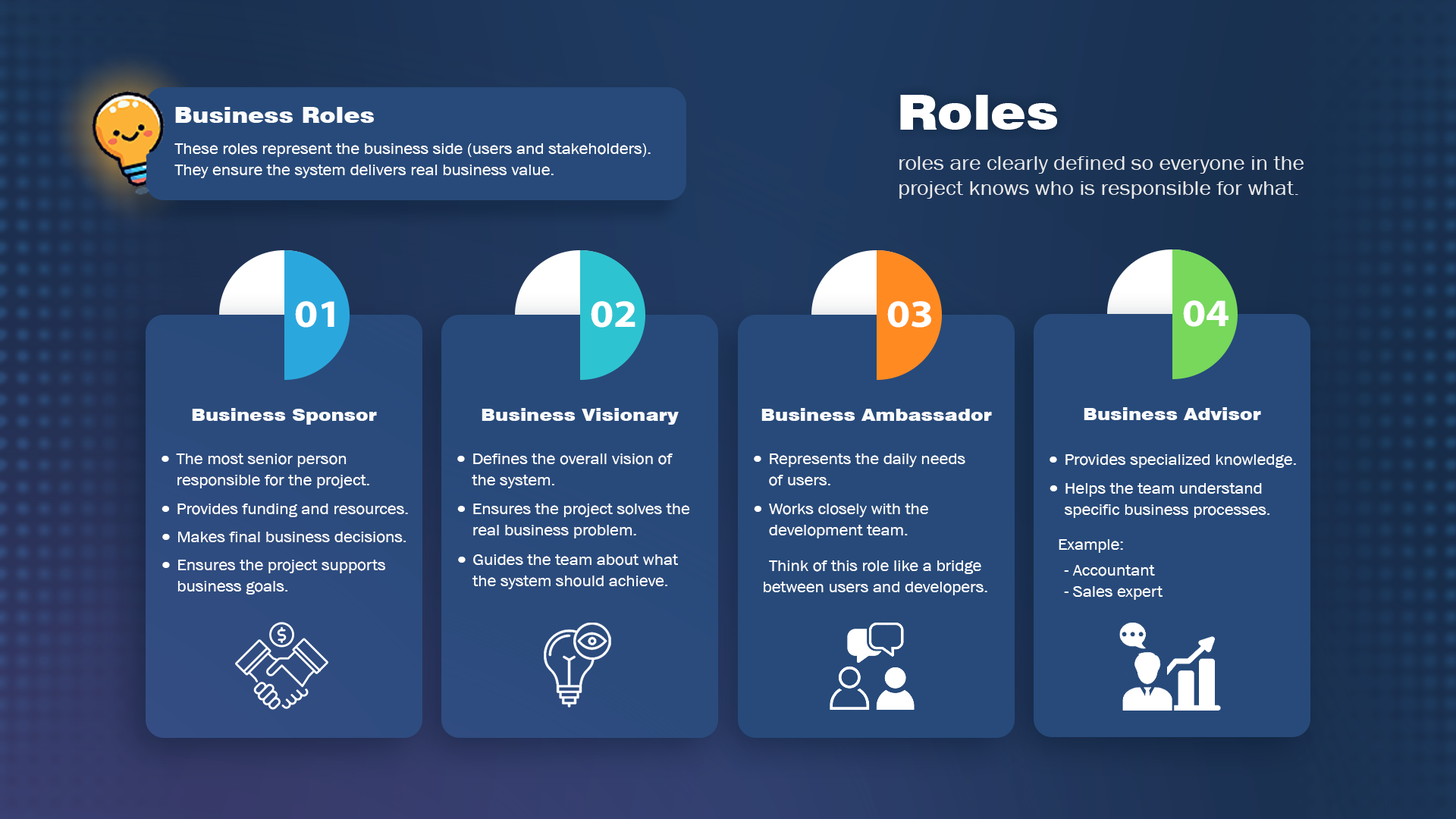
<style>
.page{position:relative;width:1456px;height:819px}
.page>*{position:absolute;margin:0}
.t1{font:48.5px "Swiss721BT-Black";color:#ffffff;scale:1.1 1}
.t2{font:21.9px "Swiss721BT-Black";color:#fafbfc;scale:1.1 1}
.t3{font:15.7px/21.3px "AA-Khmer-AngDaunPov";color:#ffffff;scale:1.1 1}
.t4{font:20.5px "AA-Khmer-AngDaunPov";color:#ffffff;scale:1.1 1}
.t5{font:38.8px "iKampuchea001_O'Chrov";color:#ffffff;scale:1.1 1}
.t6{font:17.3px "Swiss721BT-Black";color:#fafbfc;scale:1.1 1}
.t7{font:15.7px "AA-Khmer-AngDaunPov";color:#ffffff;scale:1.1 1}
.t8{font:15.6px "AA-Khmer-AngDaunPov";color:#ffffff;scale:1.1 1}
.t9{font:15.6px/21.2px "AA-Khmer-AngDaunPov";color:#ffffff;scale:1.1 1}
</style>
<div class="page">
<p class="t1" style="left:900px;top:95px;width:157px;height:35px">Roles</p>
<p class="t2" style="left:175px;top:107px;width:199px;height:16px">Business Roles</p>
<p class="t3" style="left:174px;top:143px;width:477px;height:35px">These roles represent the business side (users and stakeholders). <br>They ensure the system delivers real business value.</p>
<p class="t4" style="left:899px;top:156px;width:405px;height:43px;opacity:0.86">roles are clearly defined so everyone in the<br>project knows who is responsible for what.</p>
<p class="t5" style="left:295px;top:301px;width:39px;height:27px">01</p>
<p class="t5" style="left:591px;top:301px;width:44px;height:27px">02</p>
<p class="t5" style="left:887px;top:301px;width:44px;height:27px">03</p>
<p class="t5" style="left:1183px;top:300px;width:45px;height:27px">04</p>
<p class="t6" style="left:192px;top:408px;width:185px;height:17px">Business Sponsor</p>
<p class="t6" style="left:482px;top:408px;width:197px;height:17px">Business Visionary</p>
<p class="t6" style="left:761px;top:408px;width:231px;height:13px">Business Ambassador</p>
<p class="t6" style="left:1084px;top:407px;width:177px;height:13px">Business Advisor</p>
<p class="t3" style="left:176px;top:453px;width:193px;height:35px">The most senior person<br>responsible for the project.</p>
<p class="t3" style="left:472px;top:453px;width:201px;height:35px">Defines the overall vision of <br>the system.</p>
<p class="t3" style="left:769px;top:453px;width:196px;height:33px">Represents the daily needs <br>of users.</p>
<p class="t7" style="left:1065px;top:454px;width:231px;height:14px">Provides specialized knowledge.</p>
<p class="t3" style="left:1065px;top:483px;width:204px;height:35px">Helps the team understand <br>specific business processes.</p>
<p class="t7" style="left:177px;top:504px;width:231px;height:13px">Provides funding and resources.</p>
<p class="t3" style="left:473px;top:504px;width:217px;height:34px">Ensures the project solves the <br>real business problem.</p>
<p class="t3" style="left:769px;top:504px;width:159px;height:34px">Works closely with the <br>development team.</p>
<p class="t8" style="left:178px;top:532px;width:228px;height:11px">Makes final business decisions.</p>
<p class="t7" style="left:1059px;top:539px;width:64px;height:14px">Example:</p>
<p class="t9" style="left:472px;top:554px;width:206px;height:35px">Guides the team about what <br>the system should achieve.</p>
<p class="t9" style="left:177px;top:560px;width:208px;height:35px">Ensures the project supports <br>business goals.</p>
<p class="t3" style="left:764px;top:560px;width:223px;height:35px;text-align:center">Think of this role like a bridge<br>between users and developers.</p>
<p class="t3" style="left:1064px;top:565px;width:99px;height:35px">- Accountant<br>- Sales expert</p>
</div>
